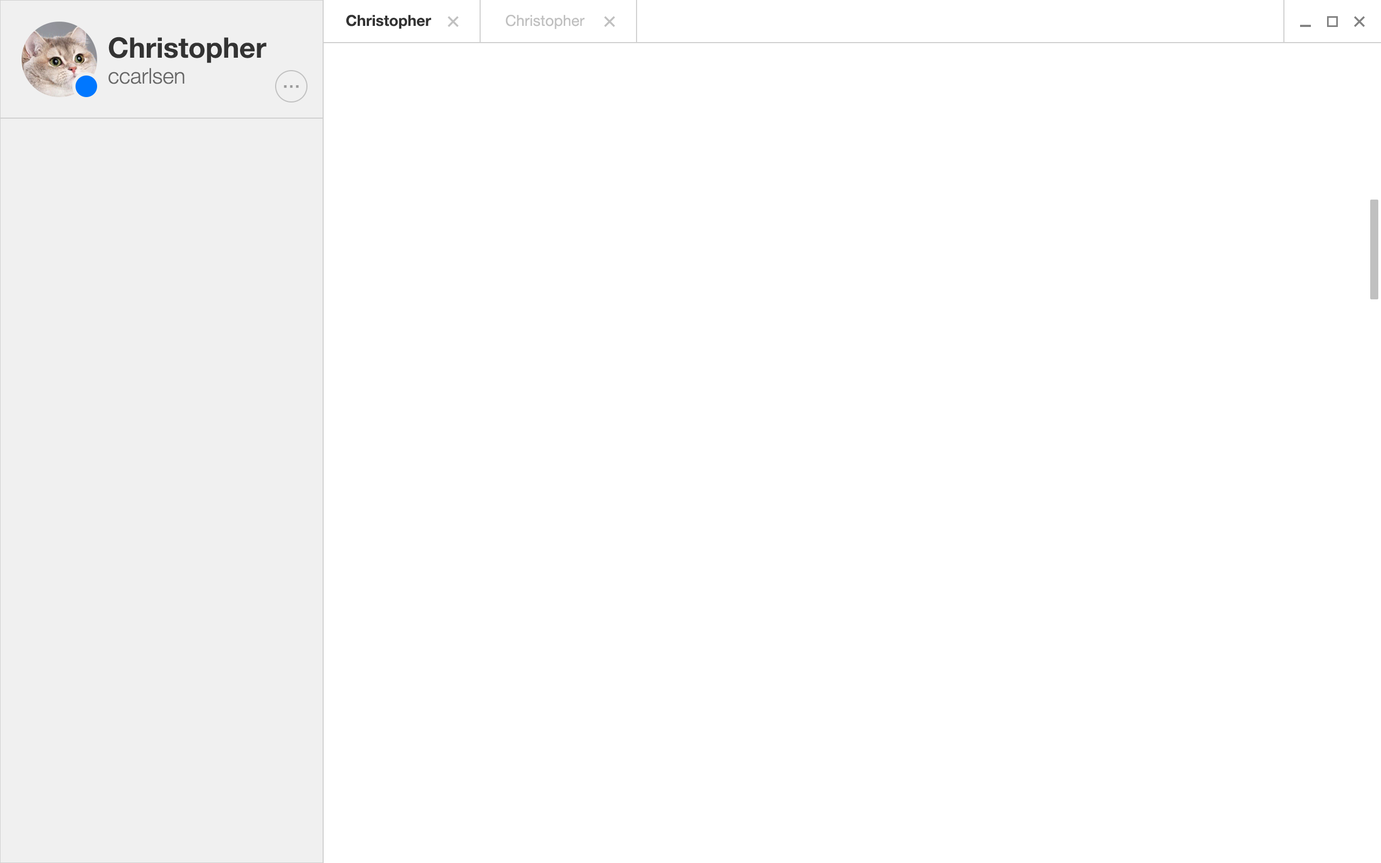
<style>
.page{position:relative;width:1381px;height:863px;background:#ffffff}
.page>*{position:absolute;margin:0}
.t1{font:15.1px "HelveticaNeue-Bold";color:#333333}
.t2{font:15.1px "HelveticaNeue";color:#bfbfbf}
.t3{font:28.1px "HelveticaNeue-Bold";color:#333333}
.t4{font:21.6px "HelveticaNeue-Light";color:#666666}
.t5{font:21.6px "HelveticaNeue";color:#999999}
</style>
<div class="page">
<p class="t1" style="left:346px;top:15px;width:86px;height:14px">Christopher</p>
<p class="t2" style="left:506px;top:15px;width:79px;height:14px">Christopher</p>
<p class="t3" style="left:108px;top:37px;width:159px;height:47px">Christopher<br><span class="t4">ccarlsen</span></p>
<p class="t5" style="left:284px;top:85px;width:15px;height:3px">...</p>
</div>
